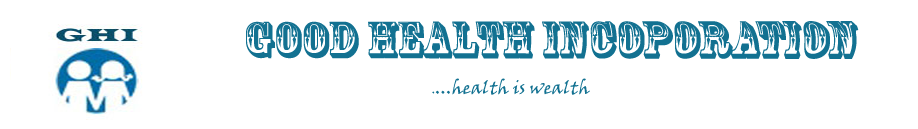
<style>
.page{position:relative;width:918px;height:129px;background:#ffffff}
.page>*{position:absolute;margin:0}
.t1{font:48px "RosewoodStd-Regular";color:#127191}
.t2{font:18px "VinerHandITC";color:#127191}
.t3{font:12px "VinerHandITC";color:#127191}
</style>
<div class="page">
<p class="t1" style="left:246px;top:21px;width:613px;height:38px">GOOD HEALTH INCOPORATION</p>
<p class="t2" style="left:432px;top:78px;width:158px;height:17px"><span class="t3">.</span>...health is wealth</p>
</div>
